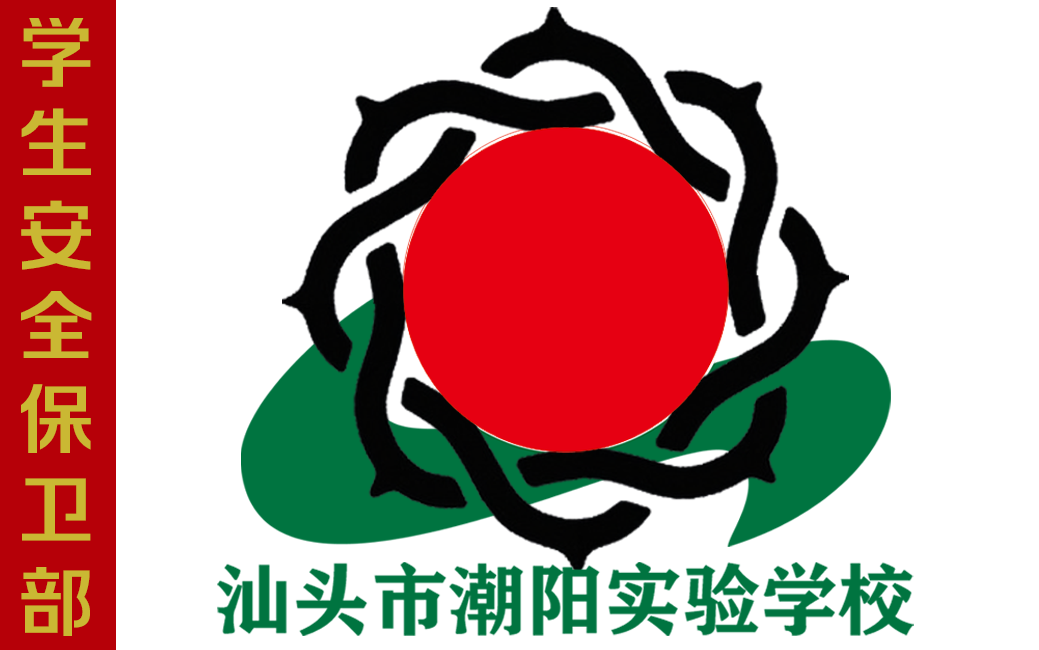
<style>
.page{position:relative;width:1039px;height:650px;background:#ffffff}
.page>*{position:absolute;margin:0}
.t1{font:76.2px "FZRUIZHK_ZHONG--GBK1-0";color:#cab833}
.t2{font:77.9px "FZCHSJW--GB1-0";color:#007440}
</style>
<div class="page">
<p class="t1" style="left:21px;top:18px;width:71px;height:618px;text-align:center">学<br>生<br>安<br>全<br>保<br>卫<br>部</p>
<p class="t2" style="left:217px;top:562px;width:697px;height:74px">汕头市潮阳实验学校</p>
</div>
